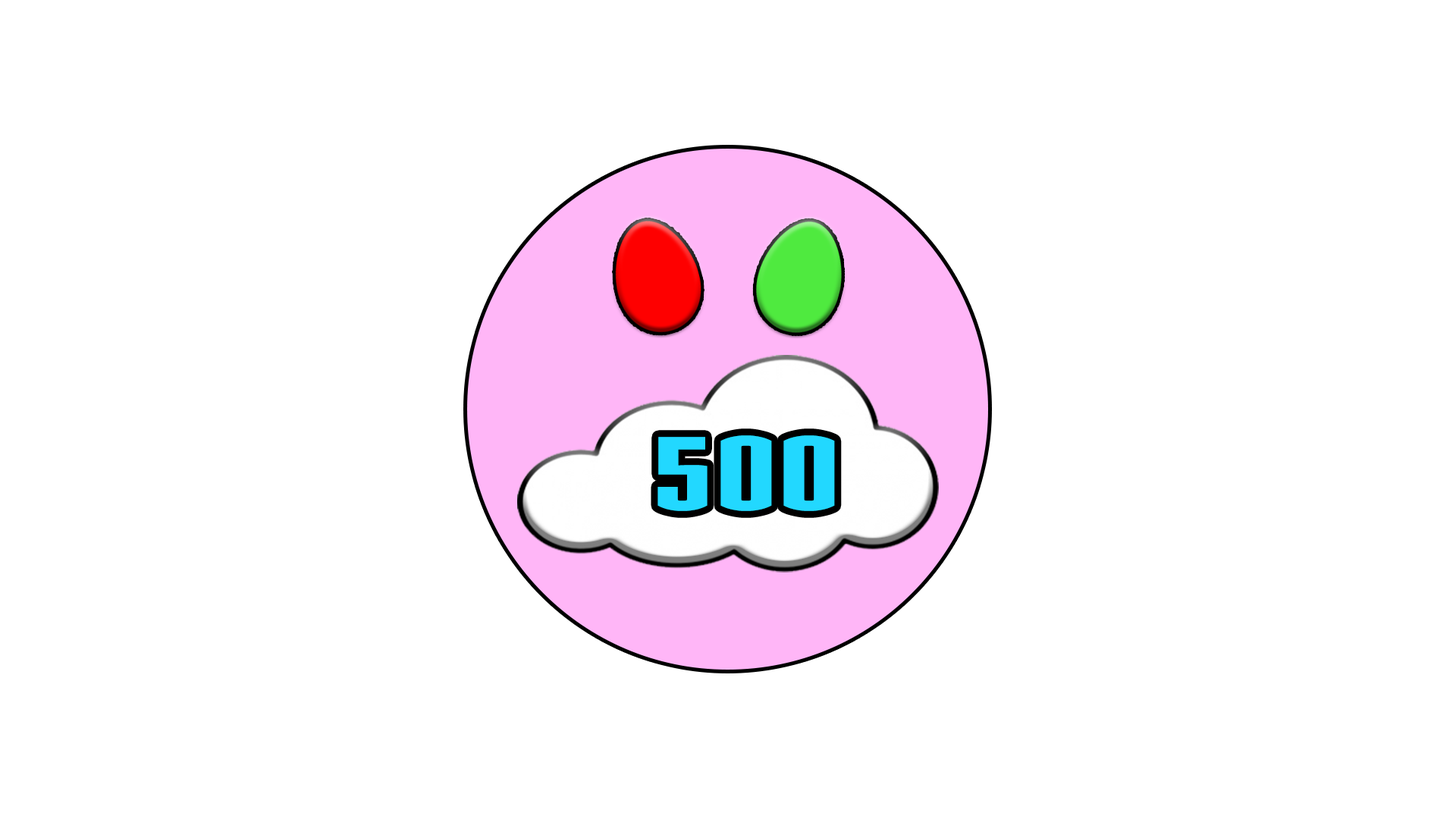
<style>
.page{position:relative;width:1456px;height:819px;background:#ffffff}
.page>*{position:absolute;margin:0}
.t1{font:99.8px "IRONMANOFWAR002NCV";letter-spacing:0.01em;color:#22d8ff;scale:1.41 1}
</style>
<div class="page">
<p class="t1" style="left:657px;top:435px;width:178px;height:76px">500</p>
</div>
